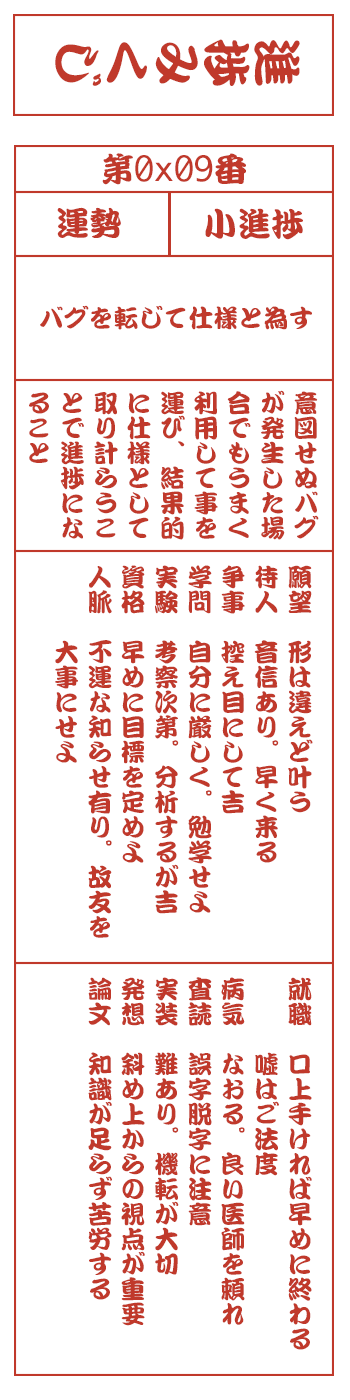
<style>
.page{position:relative;width:350px;height:1400px;background:#ffffff}
.page>*{position:absolute;margin:0}
.t1{font:50px "DFKanTeiRyu-XB-MP-RKSJ-H";color:#c0392b}
.t2{font:33.3px "Monaco";color:#c0392b}
.t3{font:33.3px "DFKanTeiRyu-XB-MP-RKSJ-H";color:#c0392b}
.t4{font:25px "DFKanTeiRyu-XB-MP-RKSJ-H";color:#c0392b}
.t5{font:25px/33.3px "DFKanTeiRyu-XB-MP-RKSJ-H";color:#c0392b}
</style>
<div class="page">
<p class="t1" style="left:55px;top:39px;width:245px;height:47px;rotate:90deg">進捗みくじ</p>
<p class="t2" style="left:102px;top:153px;width:144px;height:32px"><span class="t3">第</span>0x09<span class="t3">番</span></p>
<p class="t3" style="left:57px;top:207px;width:64px;height:31px">運勢</p>
<p class="t3" style="left:205px;top:208px;width:98px;height:32px">小進捗</p>
<p class="t4" style="left:40px;top:305px;width:272px;height:25px">バグを転じて仕様と為す</p>
<p class="t5" style="left:29px;top:390px;width:290px;height:150px">意図せぬバグ<br>が発生した場<br>合でもうまく<br>利用して事を<br>運び、結果的<br>に仕様として<br>取り計らうこ<br>とで進捗にな<br>ること</p>
<p class="t5" style="left:55px;top:565px;width:258px;height:373px">願望　形は違えど叶う<br>待人　音信あり。早く来る<br>争事　控え目にして吉<br>学問　自分に厳しく。勉学せよ<br>実験　考察次第。分析するが吉<br>資格　早めに目標を定めよ<br>人脈　不運な知らせ有り。故友を<br>　　　大事にせよ</p>
<p class="t5" style="left:88px;top:977px;width:224px;height:373px">就職　口上手ければ早めに終わる<br>　　　嘘はご法度<br>病気　なおる。良い医師を頼れ<br>査読　誤字脱字に注意<br>実装　難あり。機転が大切<br>発想　斜め上からの視点が重要<br>論文　知識が足らず苦労する</p>
</div>
